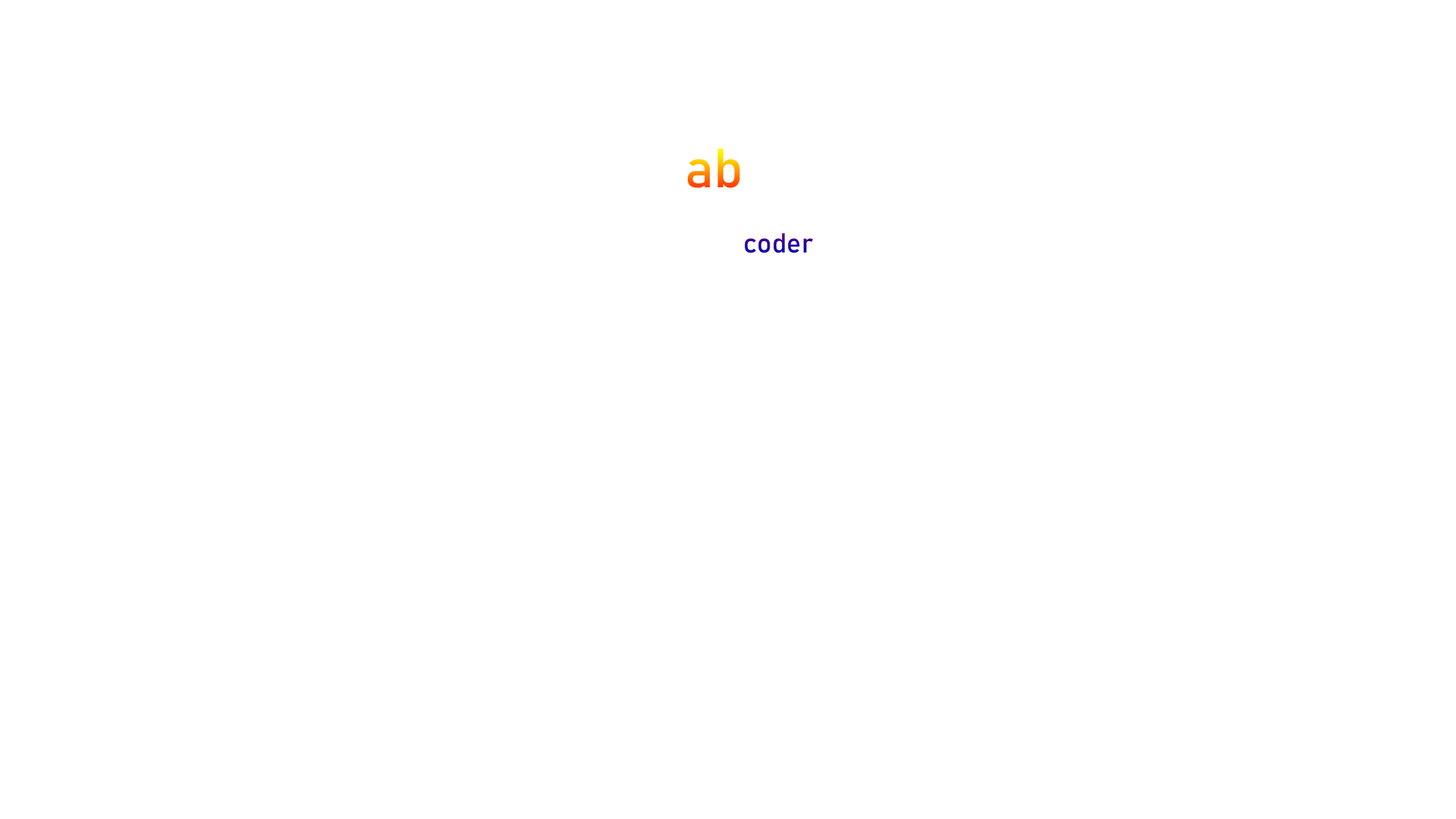
<style>
.page{position:relative;width:1456px;height:819px;background:#ffffff}
.page>*{position:absolute;margin:0}
.t1{font:27.3px "Bahnschrift"}
.t2{font:54.6px "Bahnschrift"}
</style>
<div class="page">
<p class="t1" style="left:687px;top:149px;width:127px;height:104px"><span class="t2">ab<br>    </span>coder</p>
</div>
